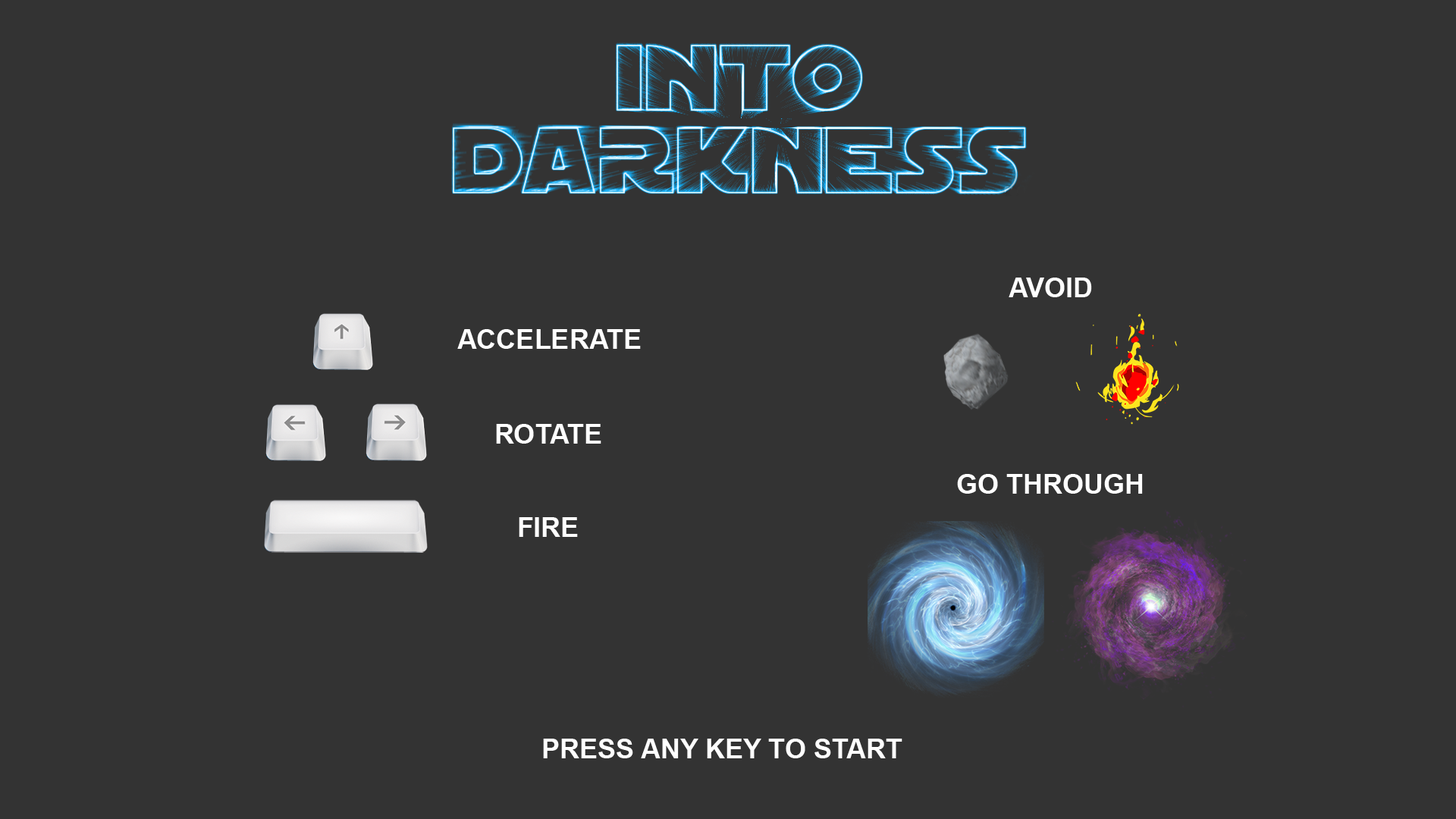
<style>
.page{position:relative;width:1456px;height:819px;background:#333333}
.page>*{position:absolute;margin:0}
.t1{font:27.3px "Arial-BoldMT";color:#ffffff}
</style>
<div class="page">
<p class="t1" style="left:1009px;top:278px;width:83px;height:19px">AVOID</p>
<p class="t1" style="left:457px;top:329px;width:184px;height:20px">ACCELERATE</p>
<p class="t1" style="left:496px;top:424px;width:105px;height:20px">ROTATE</p>
<p class="t1" style="left:957px;top:474px;width:186px;height:20px">GO THROUGH</p>
<p class="t1" style="left:519px;top:517px;width:59px;height:20px">FIRE</p>
<p class="t1" style="left:543px;top:739px;width:359px;height:19px">PRESS ANY KEY TO START</p>
</div>
